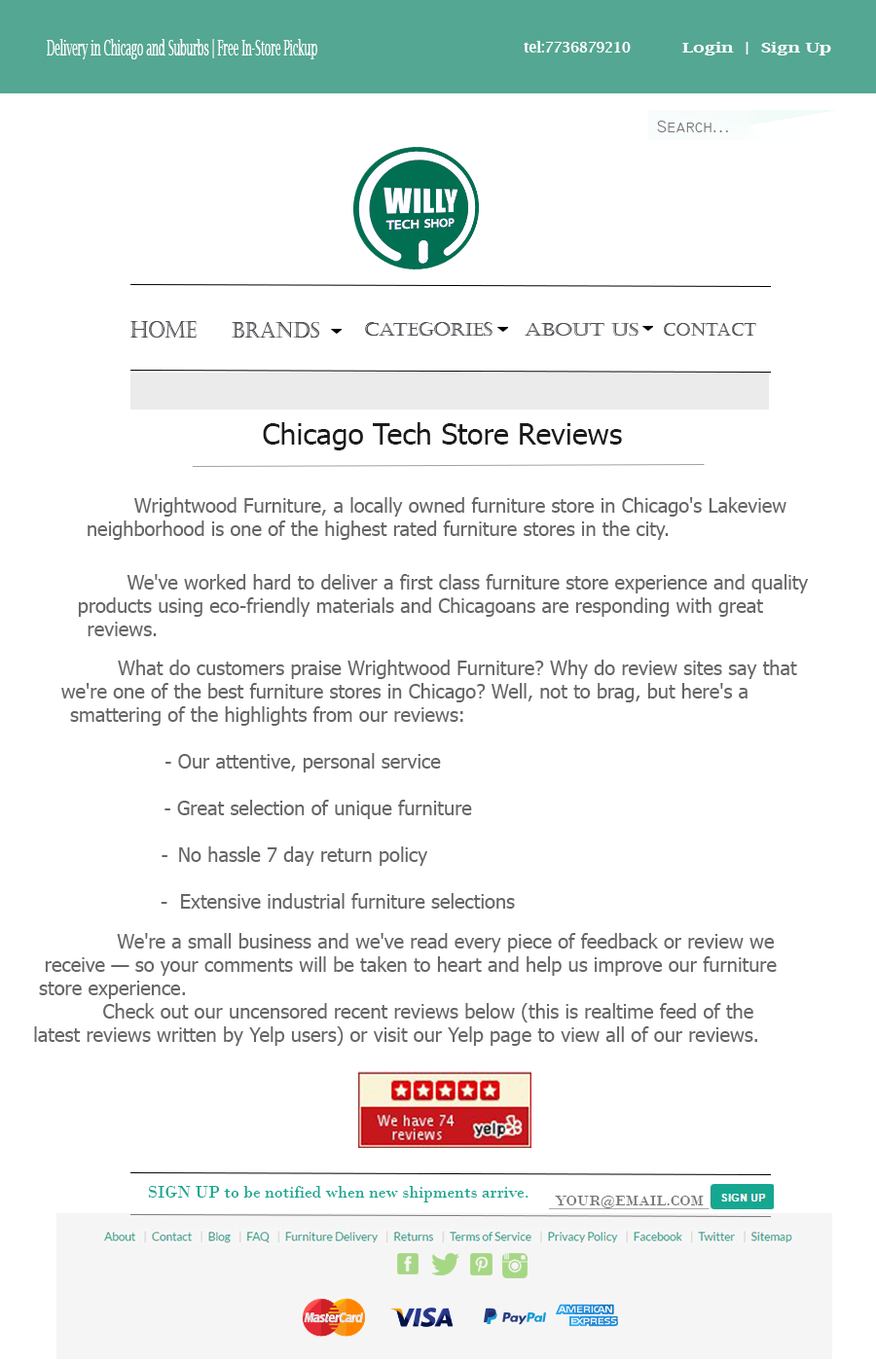
<style>
.page{position:relative;width:876px;height:1362px;background:#ffffff}
.page>*{position:absolute;margin:0}
.t1{font:21.8px "LucidaBright";color:#ffffff;scale:0.47 1}
.t2{font:14.5px "LucidaBright-Demi";color:#ffffff;scale:0.95 1}
.t3{font:13.9px "LucidaBright-Demi";color:#ffffff;scale:1.32 1}
.t4{font:11.2px "LucidaBright-Demi";color:#ffffff;scale:1.32 1}
.t5{font:17.5px "Technic";color:#757575}
.t6{font:23.1px "Castellar";color:#4e4e53;scale:0.84 1}
.t7{font:22.3px "Castellar";color:#4e4e53;scale:0.88 1}
.t8{font:18.8px "Castellar";color:#4e4e53}
.t9{font:17.1px "Castellar";color:#4e4e53;scale:1.18 1}
.t10{font:17.1px "Castellar";color:#4e4e53}
.t11{font:29.2px "Tahoma";color:#1c1a1a}
.t12{font:29.2px "Tahoma";color:#757575}
.t13{font:19.5px "Tahoma";color:#666666}
.t14{font:29.2px "Tahoma";color:#666666}
.t15{font:17.5px "BodoniMT";color:#16a791}
.t16{font:15px "BodoniMT";color:#757575;scale:1.04 1}
</style>
<div class="page">
<p class="t1" style="left:47px;top:39px;width:270px;height:20px">Delivery in Chicago and Suburbs | Free In-Store Pickup</p>
<p class="t2" style="left:523px;top:41px;width:107px;height:12px">tel:7736879210</p>
<p class="t3" style="left:682px;top:42px;width:149px;height:13px"><span class="t4"><br></span>Login  |  Sign Up</p>
<p class="t5" style="left:657px;top:121px;width:71px;height:11px">Search...</p>
<p class="t6" style="left:130px;top:321px;width:67px;height:17px">HOME</p>
<p class="t7" style="left:232px;top:322px;width:87px;height:16px">BRANDS</p>
<p class="t8" style="left:365px;top:322px;width:127px;height:14px">cATEGORIES</p>
<p class="t9" style="left:524px;top:323px;width:114px;height:13px">ABOUT US</p>
<p class="t10" style="left:663px;top:323px;width:93px;height:13px">CONTACT</p>
<p class="t11" style="left:263px;top:422px;width:359px;height:28px"><span class="t12">   </span>    Chicago Tech Store Reviews</p>
<p class="t13" style="left:88px;top:497px;width:698px;height:43px;text-align:center"><span class="t14">             </span>          Wrightwood Furniture, a locally owned furniture store in Chicago's Lakeview <br>              neighborhood is one of the highest rated furniture stores in the city.</p>
<p class="t13" style="left:78px;top:574px;width:729px;height:62px;text-align:center">We've worked hard to deliver a first class furniture store experience and quality <br>                 products using eco-friendly materials and Chicagoans are responding with great <br>reviews.</p>
<p class="t13" style="left:61px;top:660px;width:736px;height:249px;text-align:center">What do customers praise Wrightwood Furniture? Why do review sites say that <br>                                 we're one of the best furniture stores in Chicago? Well, not to brag, but here's a <br>                         smattering of the highlights from our reviews:<br><br>                           - Our attentive, personal service<br><br>                                - Great selection of unique furniture<br><br>                             - No hassle 7 day return policy<br><br>                             -  Extensive industrial furniture selections</p>
<p class="t13" style="left:34px;top:933px;width:742px;height:113px;text-align:center">We're a small business and we've read every piece of feedback or review we <br>                 receive — so your comments will be taken to heart and help us improve our furniture <br>store experience. <br>                  Check out our uncensored recent reviews below (this is realtime feed of the <br>                latest reviews written by Yelp users) or visit our Yelp page to view all of our reviews.</p>
<p class="t15" style="left:148px;top:1186px;width:380px;height:16px">SIGN UP to be notified when new shipments arrive.</p>
<p class="t16" style="left:555px;top:1196px;width:148px;height:12px">YOUR@EMAIL.COM</p>
</div>
